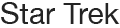
<style>
.page{position:relative;width:120px;height:28px;background:#ffffff}
.page>*{position:absolute;margin:0}
.t1{font:30px "HelveticaNeue";color:#242424}
</style>
<div class="page">
<p class="t1" style="left:1px;top:2px;width:119px;height:22px">Star Trek</p>
</div>
